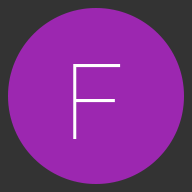
<style>
.page{position:relative;width:192px;height:192px;background:#9c27b0}
.page>*{position:absolute;margin:0}
.t1{font:105.6px "Roboto-Thin";letter-spacing:-0.05em;color:#ffffff}
</style>
<div class="page">
<p class="t1" style="left:73px;top:64px;width:48px;height:75px">F</p>
</div>
